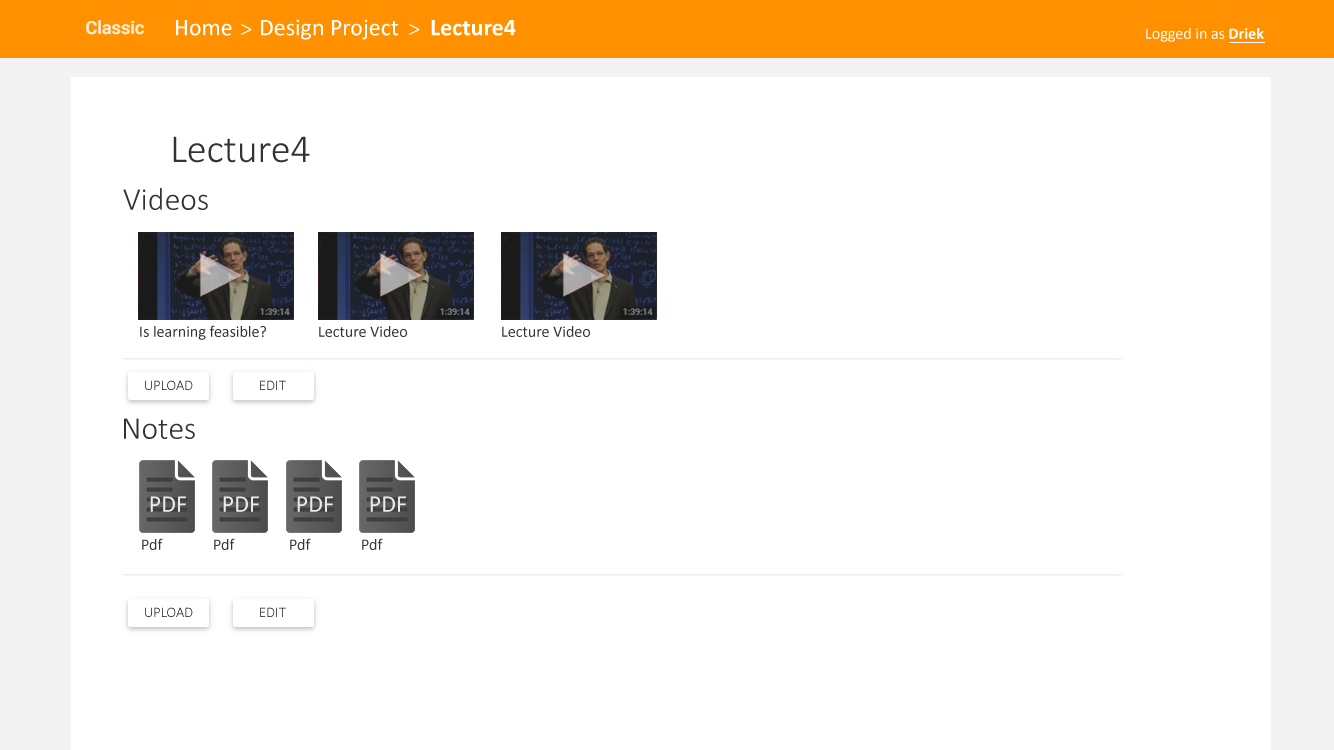
<style>
.page{position:relative;width:1334px;height:750px;background:#ffffff}
.page>*{position:absolute;margin:0}
.t1{font:24px "Calibri";color:#ffffff}
.t2{font:24px "Calibri-Light";color:#ffffff}
.t3{font:24px "Calibri-Bold";color:#ffffff}
.t4{font:16px "Calibri";color:#ffffff}
.t5{font:16px "Calibri-Bold";color:#ffffff}
.t6{font:40px "Calibri-Light";color:#333333}
.t7{font:32px "Calibri-Light";color:#333333}
.t8{font:16px "Calibri";color:#333333}
.t9{font:14.7px "Calibri-Light"}
</style>
<div class="page">
<p class="t1" style="left:176px;top:20px;width:56px;height:16px">Home</p>
<p class="t2" style="left:241px;top:24px;width:11px;height:11px">&gt;</p>
<p class="t1" style="left:261px;top:19px;width:137px;height:21px">Design Project</p>
<p class="t2" style="left:409px;top:24px;width:11px;height:11px">&gt;</p>
<p class="t3" style="left:431px;top:20px;width:85px;height:16px">Lecture4</p>
<p class="t4" style="left:1146px;top:28px;width:118px;height:14px">Logged in as <span class="t5">Driek</span></p>
<p class="t6" style="left:173px;top:136px;width:137px;height:27px">Lecture4</p>
<p class="t7" style="left:123px;top:188px;width:85px;height:22px">Videos</p>
<p class="t8" style="left:140px;top:325px;width:126px;height:15px">Is learning feasible?</p>
<p class="t8" style="left:319px;top:326px;width:88px;height:11px">Lecture Video</p>
<p class="t8" style="left:502px;top:326px;width:88px;height:11px">Lecture Video</p>
<p class="t9" style="left:145px;top:380px;width:48px;height:10px">UPLOAD</p>
<p class="t9" style="left:260px;top:380px;width:26px;height:10px">EDIT</p>
<p class="t7" style="left:124px;top:418px;width:71px;height:21px">Notes</p>
<p class="t8" style="left:142px;top:538px;width:21px;height:12px">Pdf</p>
<p class="t8" style="left:214px;top:538px;width:21px;height:12px">Pdf</p>
<p class="t8" style="left:290px;top:538px;width:21px;height:12px">Pdf</p>
<p class="t8" style="left:362px;top:538px;width:21px;height:12px">Pdf</p>
<p class="t9" style="left:145px;top:607px;width:48px;height:10px">UPLOAD</p>
<p class="t9" style="left:260px;top:607px;width:26px;height:10px">EDIT</p>
</div>
